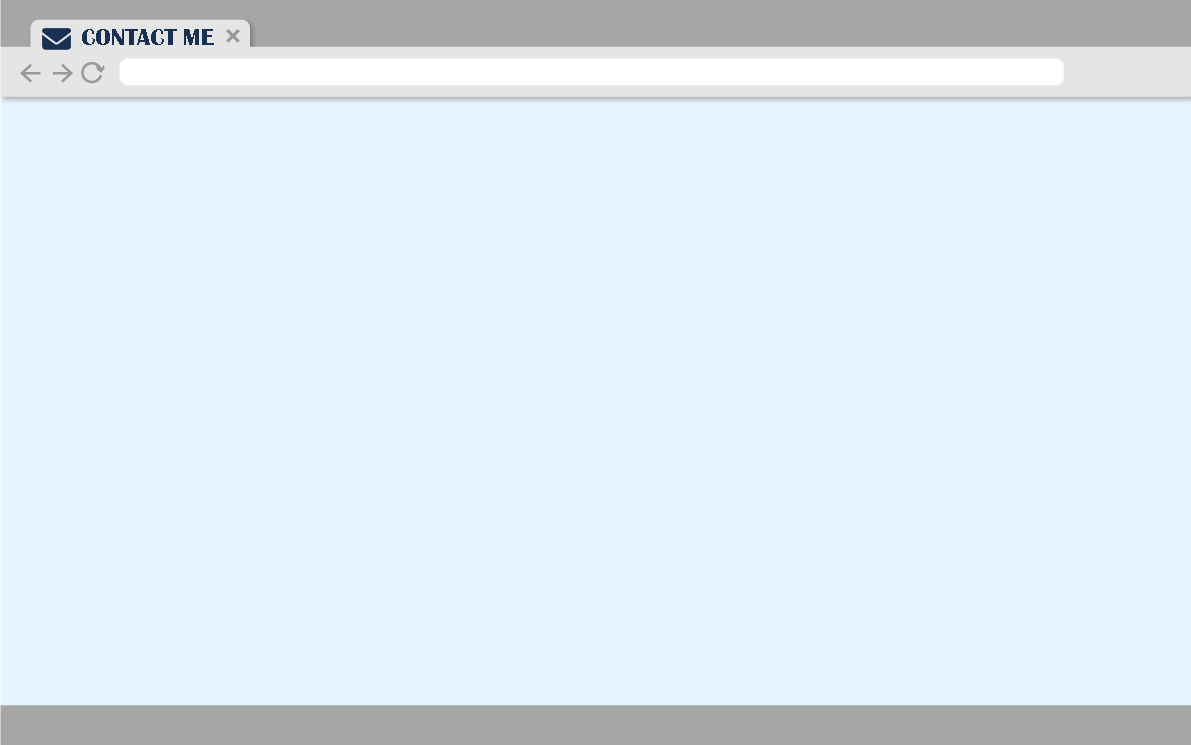
<style>
.page{position:relative;width:1191px;height:745px;background:#e5f5ff}
.page>*{position:absolute;margin:0}
.t1{font:24px "BritannicBold";color:#183153;text-transform:uppercase}
</style>
<div class="page">
<p class="t1" style="left:82px;top:29px;width:132px;height:16px">contact me</p>
</div>
